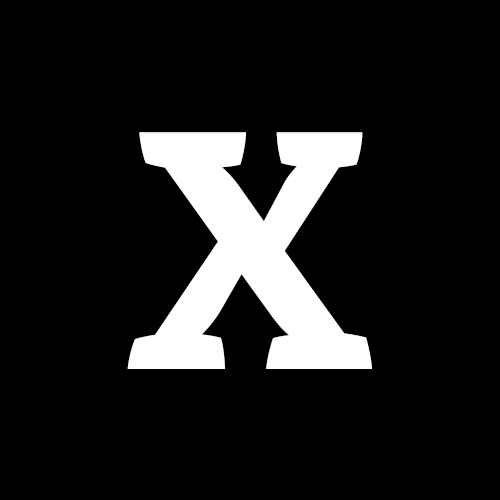
<style>
.page{position:relative;width:500px;height:500px;background:#000000}
.page>*{position:absolute;margin:0}
.t1{font:333.5px "TisaPro-Bold";color:#ffffff}
</style>
<div class="page">
<p class="t1" style="left:127px;top:132px;width:245px;height:237px">X</p>
</div>
